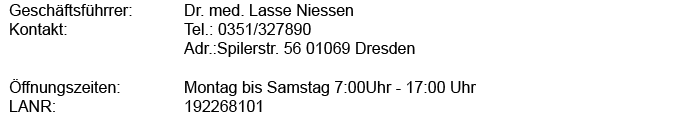
<style>
.page{position:relative;width:700px;height:125px;background:#ffffff}
.page>*{position:absolute;margin:0}
.t1{font:16px "ArialMT";color:#000000}
</style>
<div class="page">
<p class="t1" style="left:9px;top:4px;width:123px;height:108px">Geschäftsführrer: <br>Kontakt: <br><br><br>Öffnungszeiten: <br>LANR:</p>
<p class="t1" style="left:184px;top:4px;width:292px;height:108px">Dr. med. Lasse Niessen<br>Tel.: 0351/327890<br>Adr.:Spilerstr. 56 01069 Dresden<br><br>Montag bis Samstag 7:00Uhr - 17:00 Uhr<br>192268101</p>
</div>
